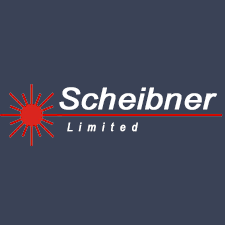
<style>
.page{position:relative;width:225px;height:225px;background:#3a4256}
.page>*{position:absolute;margin:0}
.t1{font:30px "ArialNarrow-Italic";color:#ffffff;font-weight:bold;scale:1.33 1}
.t2{font:12px "ArialNarrow-Italic";color:#ffffff;font-weight:bold}
</style>
<div class="page">
<p class="t1" style="left:59px;top:87px;width:158px;height:23px">Scheibner</p>
<p class="t2" style="left:67px;top:122px;width:71px;height:10px">L  i  m  i  t  e  d</p>
</div>
